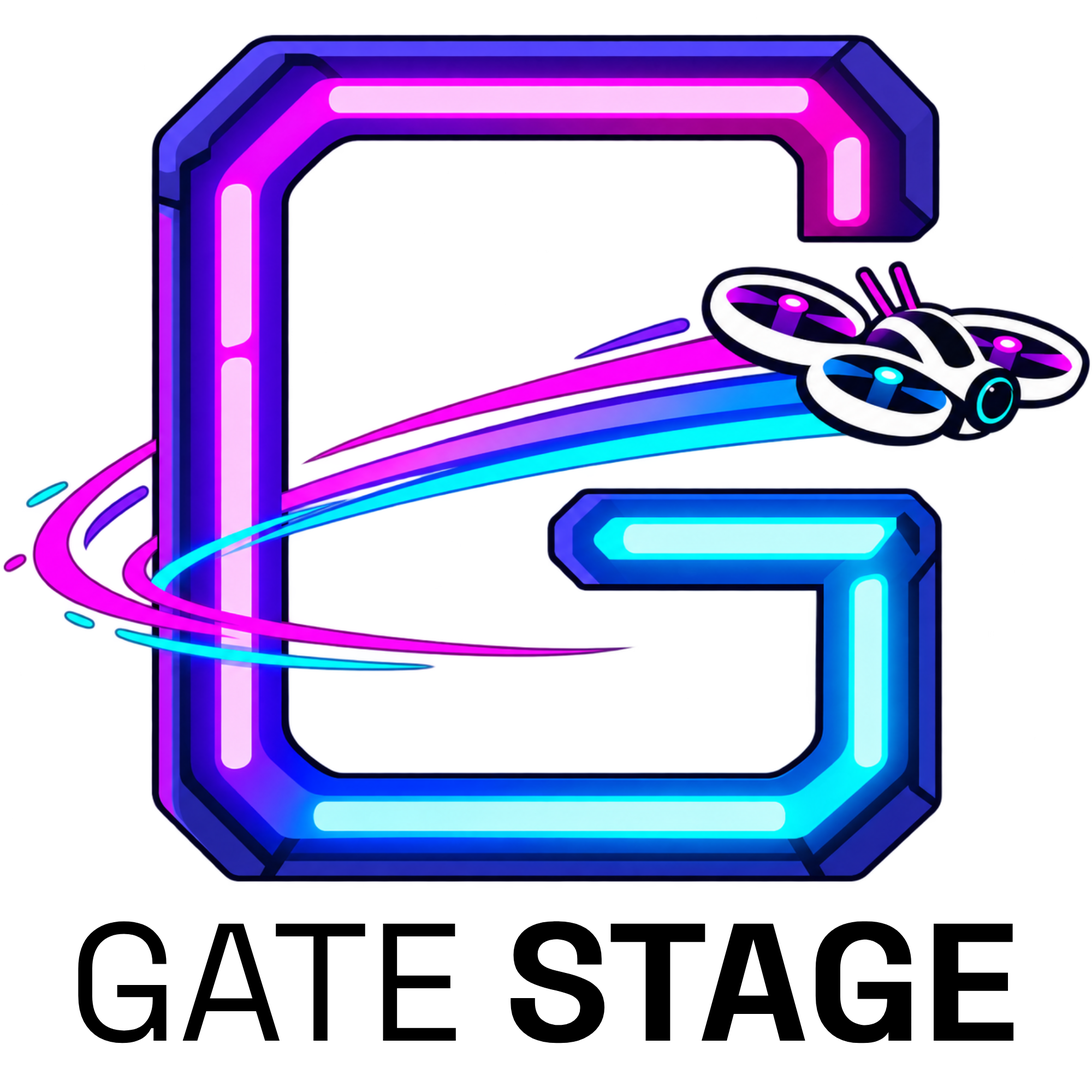
<style>
.page{position:relative;width:1092px;height:1092px;background:#ffffff}
.page>*{position:absolute;margin:0}
.t1{font:167.1px "SpaceGrotesk-SemiBold";color:#000000;font-weight:bold}
.t2{font:167.1px "SpaceGrotesk-Regular";color:#000000}
</style>
<div class="page">
<p class="t1" style="left:78px;top:921px;width:936px;height:122px"><span class="t2">GATE </span>STAGE</p>
</div>
